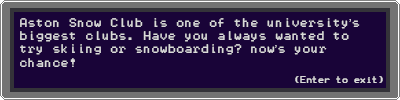
<style>
.page{position:relative;width:400px;height:100px;background:#190438}
.page>*{position:absolute;margin:0}
.t1{font:11px "Terminal";color:#dadada}
.t2{font:11px "ArialMT";color:#dadada}
</style>
<div class="page">
<p class="t1" style="left:20px;top:18px;width:340px;height:49px">Aston Snow Club is one of the university<span class="t2">’</span>s <br>biggest clubs. Have you always wanted to <br>try skiing or snowboarding? now<span class="t2">’</span>s your <br>chance!</p>
</div>
